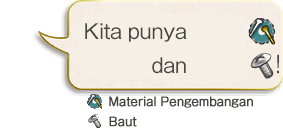
<style>
.page{position:relative;width:283px;height:133px;background:#ffffff}
.page>*{position:absolute;margin:0}
.t1{font:20px/34px "GothicMB101Pro-Regular";letter-spacing:-0.04em;color:#464642}
.t2{font:23.4px "GothicMB101Pro-Regular";letter-spacing:-0.04em;color:#464642;scale:0.85 1}
.t3{font:12px/20px "GothicMB101Pro-Regular";letter-spacing:-0.04em;color:#464642;font-weight:bold}
</style>
<div class="page">
<p class="t1" style="left:85px;top:23px;width:102px;height:51px;text-align:right">Kita punya<br>dan</p>
<p class="t2" style="left:277px;top:54px;width:2px;height:20px">!</p>
<p class="t3" style="left:109px;top:96px;width:144px;height:31px">Material Pengembangan<br>Baut</p>
</div>
